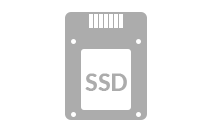
<style>
.page{position:relative;width:212px;height:128px;background:#ffffff}
.page>*{position:absolute;margin:0}
.t1{font:28.4px "Carlito-Bold";color:#acacac;scale:0.95 1}
</style>
<div class="page">
<p class="t1" style="left:85px;top:73px;width:42px;height:18px">SSD</p>
</div>
